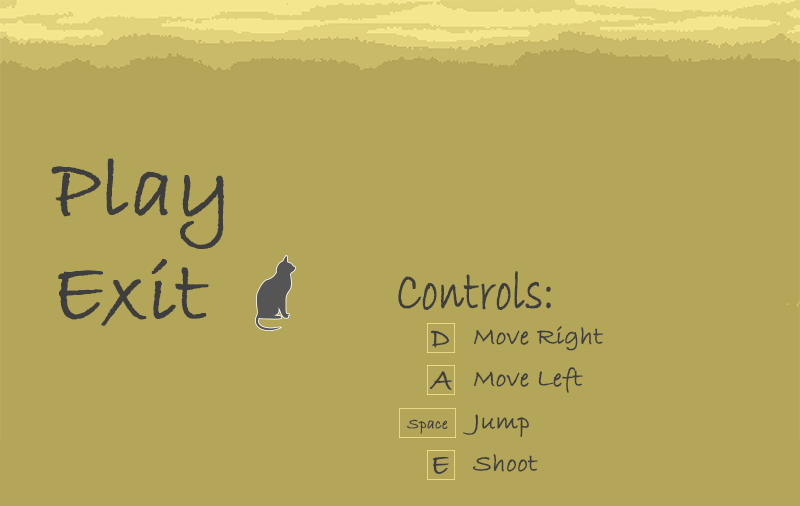
<style>
.page{position:relative;width:800px;height:506px;background:#b4a658}
.page>*{position:absolute;margin:0}
.t1{font:57.3px "BradleyHandITC";color:#3f3e3e;font-weight:bold;scale:0.69 1}
.t2{font:25.2px "BradleyHandITC";color:#3f3e3e;font-weight:bold}
.t3{font:29.9px "BradleyHandITC";color:#3f3e3e;font-weight:bold}
.t4{font:15.7px "BradleyHandITC";color:#3f3e3e;font-weight:bold}
</style>
<div class="page">
<p class="t1" style="left:398px;top:271px;width:153px;height:39px">Controls:</p>
<p class="t2" style="left:474px;top:326px;width:129px;height:25px">Move Right</p>
<p class="t3" style="left:431px;top:330px;width:19px;height:18px">D</p>
<p class="t3" style="left:430px;top:371px;width:22px;height:19px">A</p>
<p class="t2" style="left:474px;top:367px;width:109px;height:26px">Move Left</p>
<p class="t2" style="left:463px;top:414px;width:66px;height:23px">Jump</p>
<p class="t4" style="left:407px;top:419px;width:41px;height:15px">Space</p>
<p class="t3" style="left:432px;top:456px;width:17px;height:19px">E</p>
<p class="t2" style="left:472px;top:454px;width:66px;height:18px">Shoot</p>
</div>
